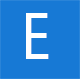
<style>
.page{position:relative;width:80px;height:79px;background:#1779d5}
.page>*{position:absolute;margin:0}
.t1{font:67.9px "MyriadPro-Regular";color:#ffffff;scale:0.86 1}
</style>
<div class="page">
<p class="t1" style="left:26px;top:13px;width:23px;height:46px">E</p>
</div>
